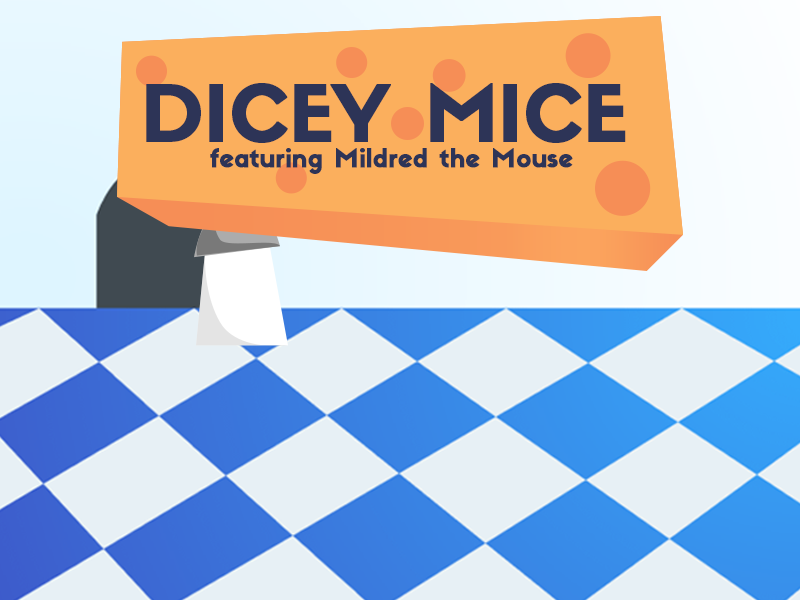
<style>
.page{position:relative;width:800px;height:600px}
.page>*{position:absolute;margin:0}
.t1{font:75.8px "Sifonn-Pro";color:#2d3457;font-weight:bold}
.t2{font:25.3px "Sifonn-Pro";color:#2d3457;font-weight:bold}
</style>
<div class="page">
<p class="t1" style="left:146px;top:83px;width:480px;height:60px">DICEY MICE</p>
<p class="t2" style="left:210px;top:148px;width:363px;height:26px">featuring Mildred the Mouse</p>
</div>
